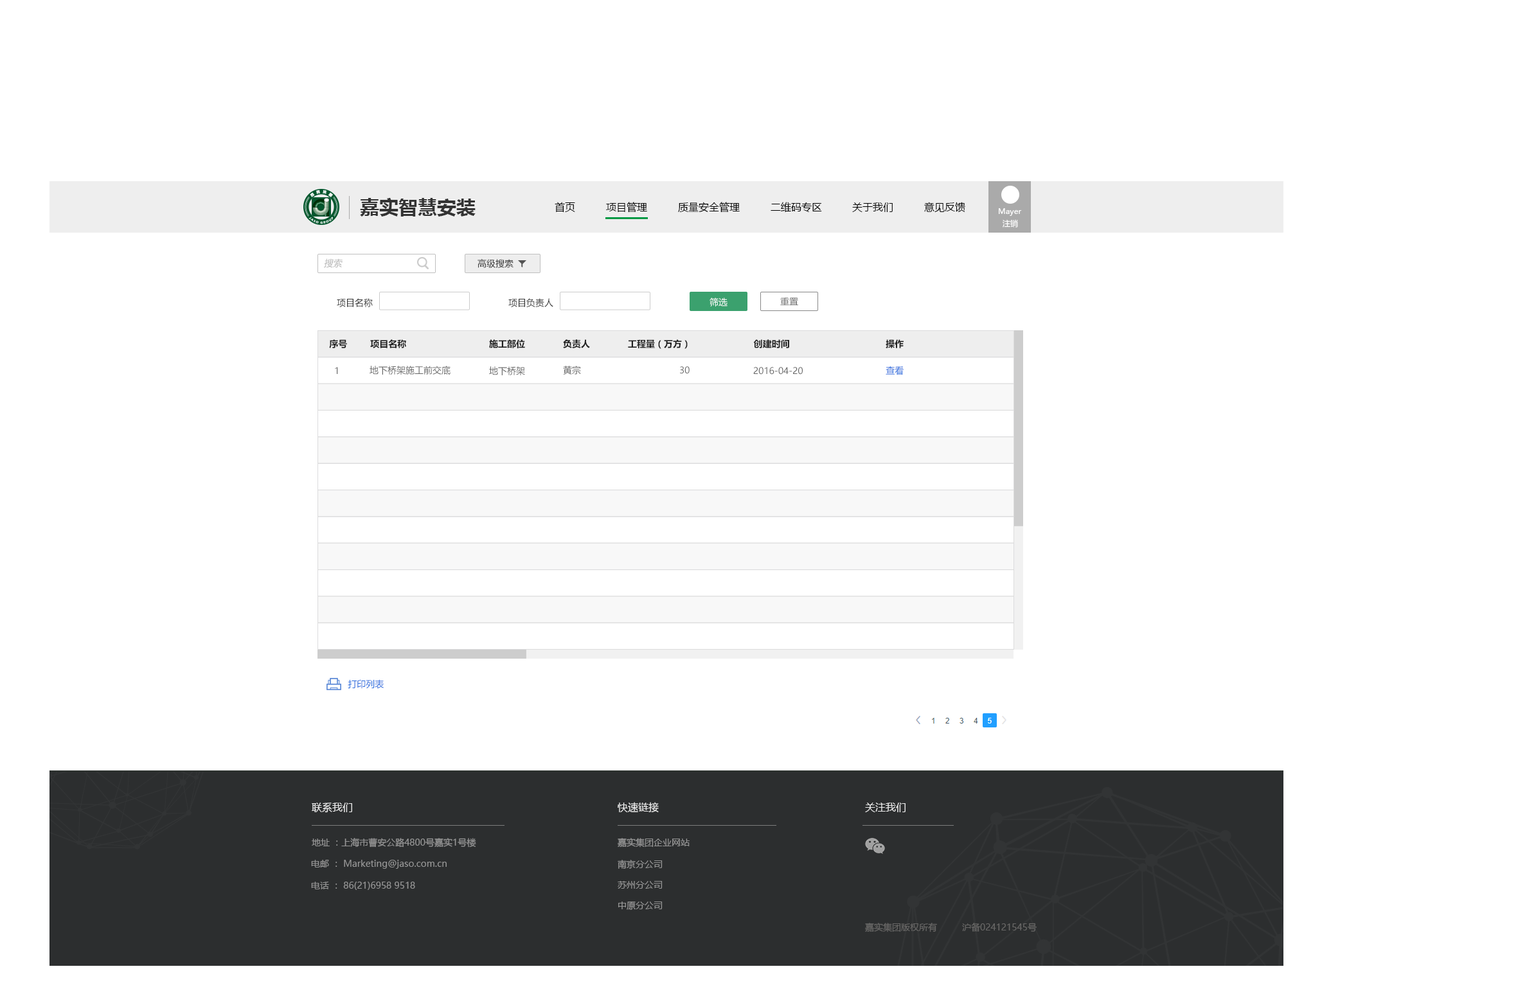
<style>
.page{position:relative;width:1536px;height:987px;background:#ffffff}
.page>*{position:absolute;margin:0}
.t1{font:19.3px "MicrosoftYaHei-Bold";color:#333333}
.t2{font:10.3px "MicrosoftYaHei";color:#000000}
.t3{font:7.7px "MicrosoftYaHei";color:#ffffff}
.t4{font:7.7px "MicrosoftYaHei";color:#fefefe}
.t5{font:9px "MicrosoftYaHei";color:#b5b5b5;font-style:italic}
.t6{font:9px "MicrosoftYaHei";color:#333333}
.t7{font:9px "MicrosoftYaHei";color:#ffffff}
.t8{font:9px "MicrosoftYaHei";color:#666666}
.t9{font:9px "MicrosoftYaHei-Bold";color:#1f1f1f}
.t10{font:9px "MicrosoftYaHei";color:#2f70de}
.t11{font:10.3px "MicrosoftYaHei";color:#eeeeee}
.t12{font:9px "MicrosoftYaHei";color:#969696}
.t13{font:9px "MicrosoftYaHei";color:#686766}
</style>
<div class="page">
<p class="t1" style="left:360px;top:198px;width:116px;height:19px">嘉实智慧安装</p>
<p class="t2" style="left:555px;top:202px;width:20px;height:11px">首页</p>
<p class="t2" style="left:606px;top:202px;width:41px;height:11px">项目管理</p>
<p class="t2" style="left:678px;top:202px;width:62px;height:11px">质量安全管理</p>
<p class="t2" style="left:771px;top:202px;width:51px;height:10px">二维码专区</p>
<p class="t2" style="left:852px;top:203px;width:41px;height:9px">关于我们</p>
<p class="t2" style="left:924px;top:202px;width:42px;height:10px">意见反馈</p>
<p class="t3" style="left:999px;top:208px;width:23px;height:8px">Mayer</p>
<p class="t4" style="left:1003px;top:219px;width:15px;height:9px">注销</p>
<p class="t5" style="left:324px;top:258px;width:19px;height:10px">搜索</p>
<p class="t6" style="left:478px;top:259px;width:36px;height:9px">高级搜索</p>
<p class="t6" style="left:337px;top:298px;width:36px;height:9px">项目名称</p>
<p class="t6" style="left:509px;top:298px;width:45px;height:9px">项目负责人</p>
<p class="t7" style="left:710px;top:298px;width:18px;height:9px">筛选</p>
<p class="t8" style="left:780px;top:298px;width:18px;height:7px">重置</p>
<p class="t9" style="left:329px;top:339px;width:18px;height:9px">序号</p>
<p class="t9" style="left:370px;top:339px;width:36px;height:9px">项目名称</p>
<p class="t9" style="left:489px;top:339px;width:36px;height:9px">施工部位</p>
<p class="t9" style="left:563px;top:339px;width:27px;height:9px">负责人</p>
<p class="t9" style="left:628px;top:339px;width:60px;height:10px">工程量（万方）</p>
<p class="t9" style="left:753px;top:339px;width:36px;height:9px">创建时间</p>
<p class="t9" style="left:886px;top:339px;width:18px;height:9px">操作</p>
<p class="t8" style="left:370px;top:366px;width:81px;height:9px">地下桥架施工前交底</p>
<p class="t8" style="left:563px;top:366px;width:18px;height:9px">黄宗</p>
<p class="t10" style="left:886px;top:366px;width:18px;height:9px">查看</p>
<p class="t8" style="left:335px;top:367px;width:3px;height:7px">1</p>
<p class="t8" style="left:489px;top:366px;width:36px;height:9px">地下桥架</p>
<p class="t8" style="left:680px;top:366px;width:10px;height:8px">30</p>
<p class="t8" style="left:753px;top:367px;width:50px;height:8px">2016-04-20</p>
<p class="t10" style="left:348px;top:680px;width:36px;height:9px">打印列表</p>
<p class="t11" style="left:312px;top:803px;width:40px;height:10px">联系我们</p>
<p class="t11" style="left:618px;top:802px;width:41px;height:11px">快速链接</p>
<p class="t11" style="left:865px;top:803px;width:41px;height:10px">关注我们</p>
<p class="t12" style="left:312px;top:838px;width:164px;height:10px">地址 ：上海市曹安公路4800号嘉实1号楼</p>
<p class="t12" style="left:618px;top:838px;width:72px;height:10px">嘉实集团企业网站</p>
<p class="t12" style="left:311px;top:860px;width:136px;height:9px">电邮 ： Marketing@jaso.com.cn</p>
<p class="t12" style="left:618px;top:860px;width:45px;height:9px">南京分公司</p>
<p class="t12" style="left:618px;top:881px;width:45px;height:8px">苏州分公司</p>
<p class="t12" style="left:311px;top:882px;width:104px;height:8px">电话 ： 86(21)6958 9518</p>
<p class="t12" style="left:618px;top:902px;width:45px;height:8px">中原分公司</p>
<p class="t13" style="left:865px;top:923px;width:72px;height:10px">嘉实集团版权所有</p>
<p class="t13" style="left:962px;top:923px;width:75px;height:9px">沪备024121545号</p>
</div>
